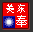
<style>
.page{position:relative;width:33px;height:32px;background:#f20000}
.page>*{position:absolute;margin:0}
.t1{font:10.4px "SimSun";color:#ffffff}
.t2{font:11.7px "SimSun";color:#ffffff}
</style>
<div class="page">
<p class="t1" style="left:6px;top:4px;width:19px;height:9px">美东</p>
<p class="t2" style="left:16px;top:15px;width:11px;height:12px">奉</p>
</div>
